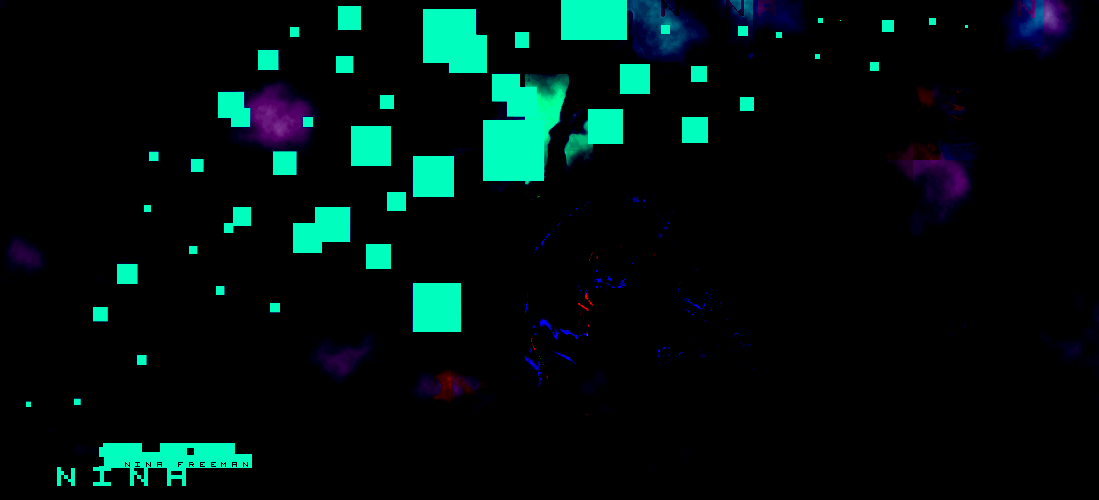
<style>
.page{position:relative;width:1099px;height:500px;background:#000000}
.page>*{position:absolute;margin:0}
.t1{font:14px "VisitorTT2BRK";letter-spacing:0.3em;color:#000000}
.t2{font:48px "VisitorTT2BRK";letter-spacing:0.3em;color:#00ffbf}
</style>
<div class="page">
<p class="t1" style="left:125px;top:462px;width:123px;height:5px">NINA FREEMAN</p>
<p class="t2" style="left:57px;top:467px;width:129px;height:19px">NINA</p>
</div>
